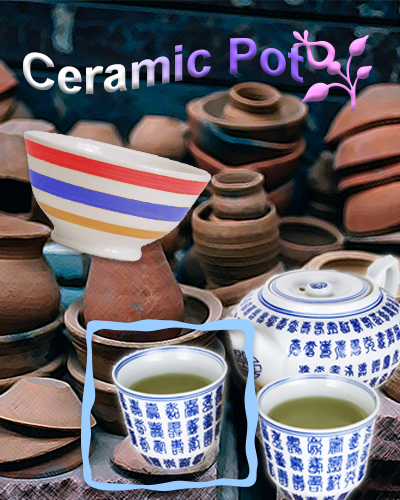
<style>
.page{position:relative;width:400px;height:500px}
.page>*{position:absolute;margin:0}
.t1{font:48.5px "Arial-BoldMT"}
</style>
<div class="page">
<p class="t1" style="left:23px;top:38px;width:281px;height:57px">Ceramic Pot</p>
</div>
